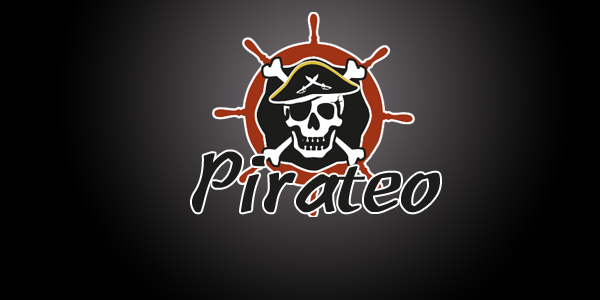
<style>
.page{position:relative;width:600px;height:300px;background:#000000}
.page>*{position:absolute;margin:0}
.t1{font:97.9px "STLibianSC-Regular";letter-spacing:-0.025em;color:#1c1c1a;font-weight:bold}
</style>
<div class="page">
<p class="t1" style="left:192px;top:151px;width:248px;height:62px">Pirateo</p>
</div>
